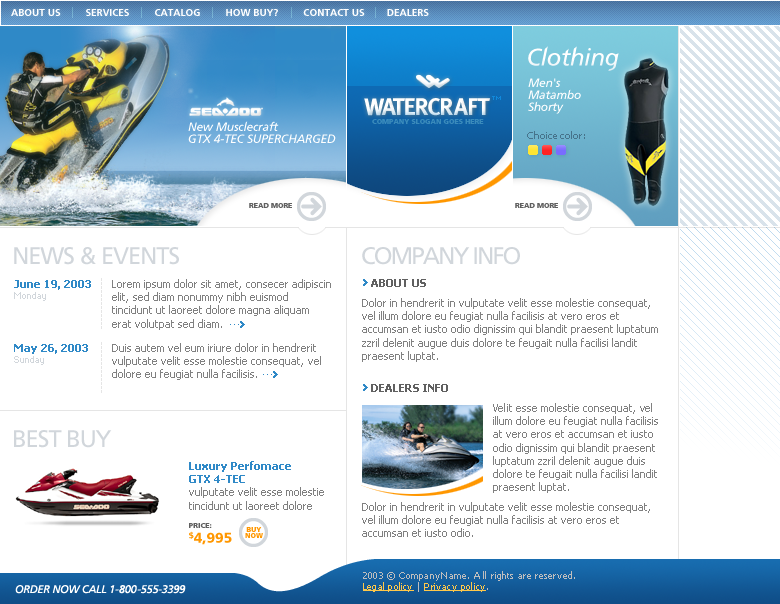
<style>
.page{position:relative;width:780px;height:604px;background:#ffffff}
.page>*{position:absolute;margin:0}
.t1{font:10px "FreewayDemi";color:#ffffff;text-transform:uppercase}
.t2{font:24px "FreewayRomanItalic";letter-spacing:-0.02em;color:#ffffff}
.t3{font:12px/12px "FreewayRomanItalic";letter-spacing:-0.02em;color:#ffffff}
.t4{font:24px "MetaC-Bold";letter-spacing:-0.04em;color:#ffffff;text-transform:uppercase}
.t5{font:7px "FreewayBlack";color:#3a8bbb;text-transform:uppercase}
.t6{font:10px "Tahoma";letter-spacing:-0.02em;color:#46738b}
.t7{font:7px "FreewayBlack";color:#606060;text-transform:uppercase}
.t8{font:24px "FreewayRoman1";letter-spacing:-0.05em;color:#d1d6db;text-transform:uppercase}
.t9{font:24px "FreewayRoman1";letter-spacing:-0.08em;color:#d1d6db;text-transform:uppercase}
.t10{font:11px "Tahoma-Bold";color:#2f89c7}
.t11{font:9px "GenevaCY";color:#d1d6db}
.t12{font:11px "Tahoma";color:#808080}
.t13{font:11px "Tahoma-Bold";color:#606060}
.t14{font:11px "Tahoma-Bold";color:#606060;text-transform:uppercase}
.t15{font:14px "FreewayBlack";color:#ff9700;text-transform:uppercase}
.t16{font:7px/6px "FreewayBlack";color:#ff9700;text-transform:uppercase}
.t17{font:9px "Tahoma";letter-spacing:0.025em;color:#bebebe}
.t18{font:9px "Tahoma";letter-spacing:0.025em;color:#ffc84a;text-decoration:underline}
.t19{font:11px "FreewayRomanItalic";letter-spacing:-0.025em;color:#ffffff}
</style>
<div class="page">
<p class="t1" style="left:11px;top:9px;width:418px;height:7px">About Us         Services         catalog         how buy?         Contact Us        DEALERS</p>
<p class="t2" style="left:528px;top:46px;width:91px;height:25px">Clothing</p>
<p class="t3" style="left:528px;top:78px;width:53px;height:36px">Men's <br>Matambo <br>Shorty</p>
<p class="t4" style="left:364px;top:98px;width:126px;height:18px">Watercraft</p>
<p class="t3" style="left:188px;top:121px;width:148px;height:22px">New Musclecraft<br>GTX 4-TEC SUPERCHARGED</p>
<p class="t5" style="left:372px;top:119px;width:112px;height:5px">company slogan goes here</p>
<p class="t6" style="left:527px;top:131px;width:58px;height:8px">Choice color:</p>
<p class="t7" style="left:249px;top:203px;width:43px;height:5px">read more</p>
<p class="t7" style="left:515px;top:203px;width:43px;height:5px">read more</p>
<p class="t8" style="left:14px;top:247px;width:165px;height:18px">news &amp; events</p>
<p class="t9" style="left:362px;top:247px;width:158px;height:18px">cOMPANY info</p>
<p class="t10" style="left:14px;top:280px;width:77px;height:21px">June 19, 2003<br><span class="t11">Monday</span></p>
<p class="t12" style="left:112px;top:279px;width:219px;height:51px">Lorem ipsum dolor sit amet, consecer adipiscin<br>elit, sed diam nonummy nibh euismod <br>tincidunt ut laoreet dolore magna aliquam<br>erat volutpat sed diam.</p>
<p class="t13" style="left:371px;top:279px;width:55px;height:8px">ABOUT US</p>
<p class="t12" style="left:362px;top:298px;width:296px;height:64px">Dolor in hendrerit in vulputate velit esse molestie consequat, <br>vel illum dolore eu feugiat nulla facilisis at vero eros et <br>accumsan et iusto odio dignissim qui blandit praesent luptatum <br>zzril delenit augue duis dolore te feugait nulla facilisi landit <br>praesent luptat.</p>
<p class="t10" style="left:14px;top:344px;width:74px;height:21px">May 26, 2003<br><span class="t11">Sunday</span></p>
<p class="t12" style="left:112px;top:343px;width:209px;height:37px">Duis autem vel eum iriure dolor in hendrerit<br>vulputate velit esse molestie consequat, vel<br>dolore eu feugiat nulla facilisis.</p>
<p class="t14" style="left:371px;top:384px;width:77px;height:8px">DEALERS INFO</p>
<p class="t12" style="left:493px;top:403px;width:165px;height:90px">Velit esse molestie consequat, vel<br>illum dolore eu feugiat nulla facilisis <br>at vero eros et accumsan et iusto <br>odio dignissim qui blandit praesent <br>luptatum zzril delenit augue duis <br>dolore te feugait nulla facilisi landit <br>praesent luptat.</p>
<p class="t8" style="left:14px;top:430px;width:98px;height:18px">BEST BUY</p>
<p class="t12" style="left:189px;top:461px;width:135px;height:49px"><span class="t10">Luxury Perfomace<br>GTX 4-TEC<br></span>vulputate velit esse molestie<br>tincidunt ut laoreet dolore</p>
<p class="t12" style="left:362px;top:502px;width:288px;height:35px">Dolor in hendrerit in vulputate velit esse molestie consequat, <br>vel illum dolore eu feugiat nulla facilisis at vero eros et <br>accumsan et iusto odio.</p>
<p class="t7" style="left:189px;top:523px;width:23px;height:5px">price:</p>
<p class="t15" style="left:189px;top:531px;width:43px;height:14px">$4,995</p>
<p class="t16" style="left:245px;top:527px;width:18px;height:11px;text-align:center">BUY<br>NOW</p>
<p class="t17" style="left:363px;top:571px;width:212px;height:21px">2003 © CompanyName. All rights are reserved. <br><span class="t18">Legal policy </span>| <span class="t18">Privacy policy</span>.</p>
<p class="t19" style="left:15px;top:585px;width:171px;height:9px">ORDER NOW CALL 1-800-555-3399</p>
</div>
